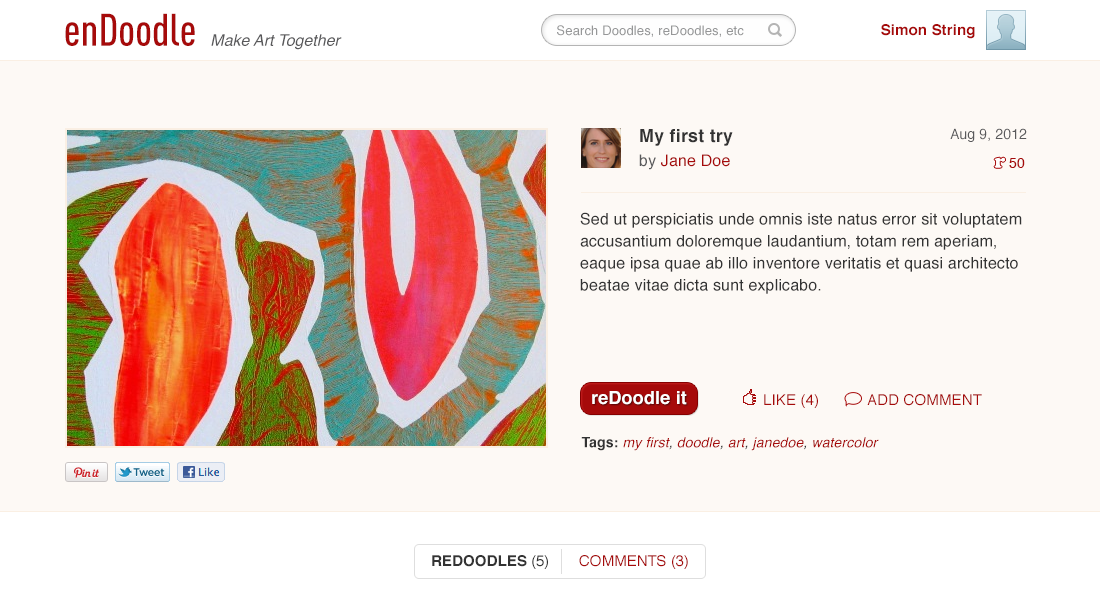
<style>
.page{position:relative;width:1100px;height:598px;background:#fdf9f5}
.page>*{position:absolute;margin:0}
.t1{font:45px "DINCond-Medium";color:#a60a0a}
.t2{font:13px "Helvetica";letter-spacing:0.01em;color:#969798}
.t3{font:15px "Helvetica-Bold";letter-spacing:0.01em;color:#a60a0a}
.t4{font:16px "Helvetica-Oblique";color:#59595b}
.t5{font:18px/24px "Helvetica-Bold";letter-spacing:0.01em;color:#333333}
.t6{font:16px/24px "Helvetica";letter-spacing:0.01em;color:#59595b}
.t7{font:16px/24px "Helvetica";letter-spacing:0.01em;color:#a60a0a}
.t8{font:14px "Helvetica";letter-spacing:0.01em;color:#59595b}
.t9{font:14px "Helvetica";letter-spacing:0.01em;color:#a60a0a}
.t10{font:16px/22px "Helvetica";letter-spacing:0.01em;color:#333333}
.t11{font:18px "Helvetica-Bold";letter-spacing:0.01em;color:#ffffff}
.t12{font:15px "Helvetica";letter-spacing:0.01em;color:#a60a0a}
.t13{font:14px "Helvetica-Oblique";letter-spacing:0.01em;color:#a60a0a}
.t14{font:14px "Helvetica-Bold";letter-spacing:0.01em;color:#333333}
.t15{font:14px "Helvetica-Oblique";letter-spacing:0.01em;color:#333333}
.t16{font:15px "Helvetica-Bold";letter-spacing:0.01em;color:#333333}
.t17{font:15px "Helvetica";letter-spacing:0.01em;color:#333333}
</style>
<div class="page">
<p class="t1" style="left:65px;top:13px;width:130px;height:33px">enDoodle</p>
<p class="t2" style="left:557px;top:25px;width:187px;height:12px">Search Doodles, reDoodles, etc</p>
<p class="t3" style="left:881px;top:24px;width:94px;height:15px">Simon String</p>
<p class="t4" style="left:211px;top:34px;width:131px;height:16px">Make Art Together</p>
<p class="t5" style="left:639px;top:129px;width:94px;height:41px">My first try<br><span class="t6">by </span><span class="t7">Jane Doe</span></p>
<p class="t8" style="left:950px;top:128px;width:77px;height:14px">Aug 9, 2012</p>
<p class="t9" style="left:1009px;top:158px;width:16px;height:10px">50</p>
<p class="t10" style="left:580px;top:212px;width:442px;height:82px">Sed ut perspiciatis unde omnis iste natus error sit voluptatem accusantium doloremque laudantium, totam rem aperiam, eaque ipsa quae ab illo inventore veritatis et quasi architecto beatae vitae dicta sunt explicabo.</p>
<p class="t11" style="left:592px;top:391px;width:95px;height:14px">reDoodle it</p>
<p class="t12" style="left:764px;top:394px;width:54px;height:14px">LIKE (4)</p>
<p class="t12" style="left:867px;top:394px;width:115px;height:12px">ADD COMMENT</p>
<p class="t13" style="left:581px;top:437px;width:298px;height:14px"><span class="t14">Tags: </span>my first<span class="t15">, </span>doodle<span class="t15">, </span>art<span class="t15">, </span>janedoe<span class="t15">, </span>watercolor</p>
<p class="t16" style="left:432px;top:555px;width:116px;height:14px">REDOODLES <span class="t17">(5)</span></p>
<p class="t12" style="left:579px;top:555px;width:109px;height:14px">COMMENTS (3)</p>
</div>
